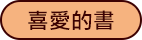
<style>
.page{position:relative;width:142px;height:40px;background:#f6b37f}
.page>*{position:absolute;margin:0}
.t1{font:22px "MicrosoftJhengHeiBold";color:#3d0202}
</style>
<div class="page">
<p class="t1" style="left:28px;top:10px;width:86px;height:20px">喜愛的書</p>
</div>
